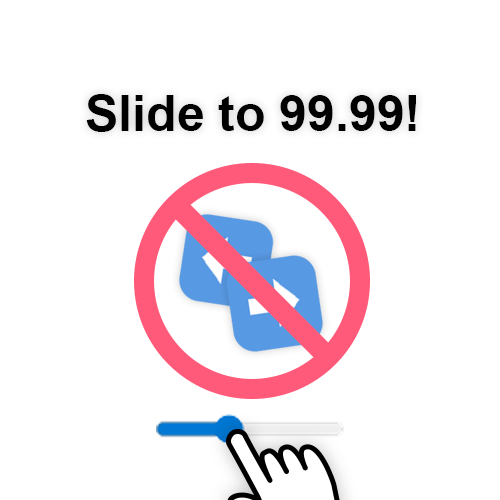
<style>
.page{position:relative;width:500px;height:500px;background:#ffffff}
.page>*{position:absolute;margin:0}
.t1{font:50px "Arial-BoldMT";color:#000000}
</style>
<div class="page">
<p class="t1" style="left:86px;top:94px;width:330px;height:38px">Slide to 99.99!</p>
</div>
